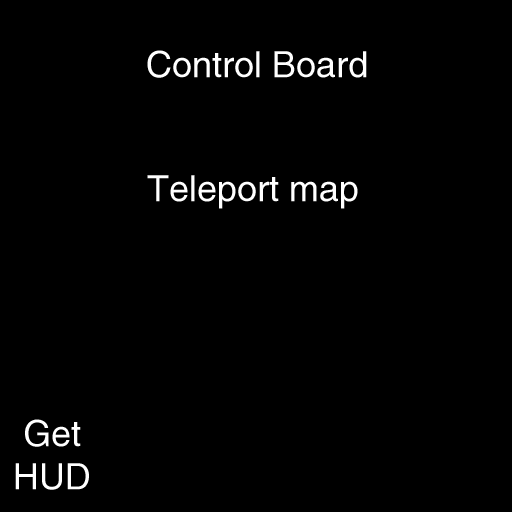
<style>
.page{position:relative;width:512px;height:512px;background:#000000}
.page>*{position:absolute;margin:0}
.t1{font:36px "Helvetica";color:#ffffff}
</style>
<div class="page">
<p class="t1" style="left:147px;top:50px;width:220px;height:28px">Control Board</p>
<p class="t1" style="left:147px;top:175px;width:211px;height:34px">Teleport map</p>
<p class="t1" style="left:15px;top:419px;width:74px;height:71px;text-align:center">Get<br>HUD</p>
</div>
